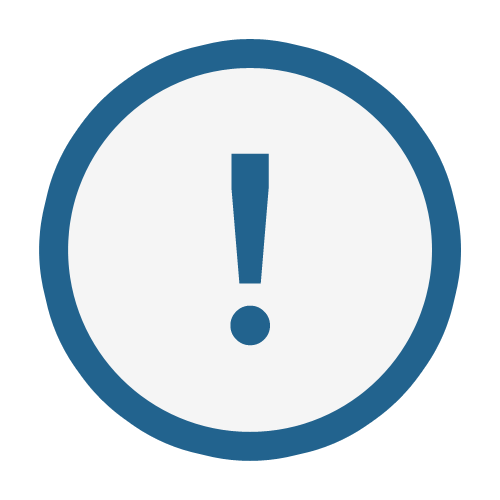
<style>
.page{position:relative;width:500px;height:500px;background:#ffffff}
.page>*{position:absolute;margin:0}
.t1{font:264px "Montserrat-Regular";color:#22638e}
</style>
<div class="page">
<p class="t1" style="left:230px;top:153px;width:40px;height:193px">!</p>
</div>
